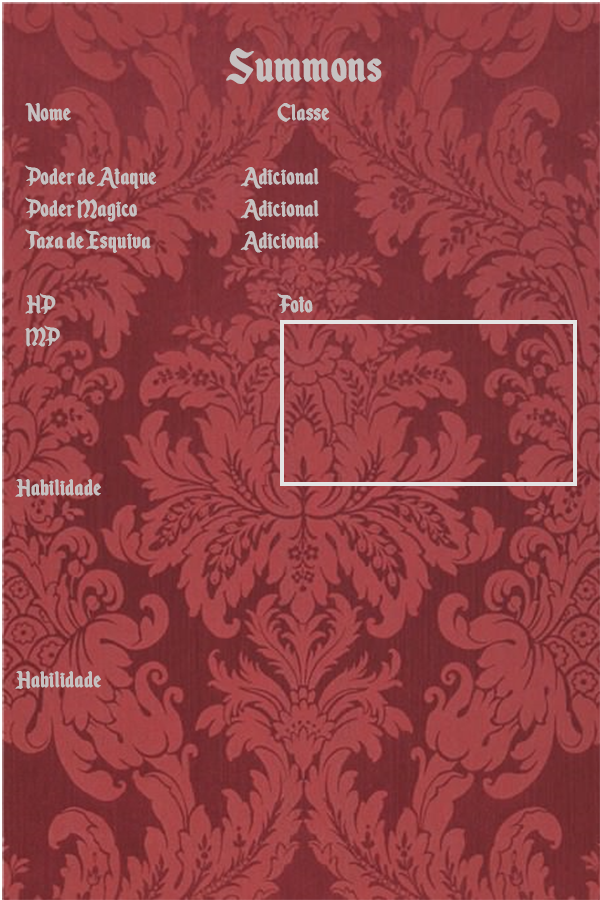
<style>
.page{position:relative;width:600px;height:900px}
.page>*{position:absolute;margin:0}
.t1{font:53.3px "EnchantedLand";color:#c6c1c1;font-weight:bold}
.t2{font:26.7px "EnchantedLand";color:#c6c1c1;font-weight:bold}
</style>
<div class="page">
<p class="t1" style="left:226px;top:48px;width:156px;height:36px">Summons</p>
<p class="t2" style="left:25px;top:103px;width:305px;height:244px">Nome      Classe<br><br>Poder de Ataque   Adicional<br>Poder Magico   Adicional<br>Taxa de Esquiva   Adicional     <br><br>HP       Foto      <br>MP</p>
<p class="t2" style="left:15px;top:479px;width:86px;height:210px">Habilidade <br><br><br><br><br><br>Habilidade</p>
</div>
